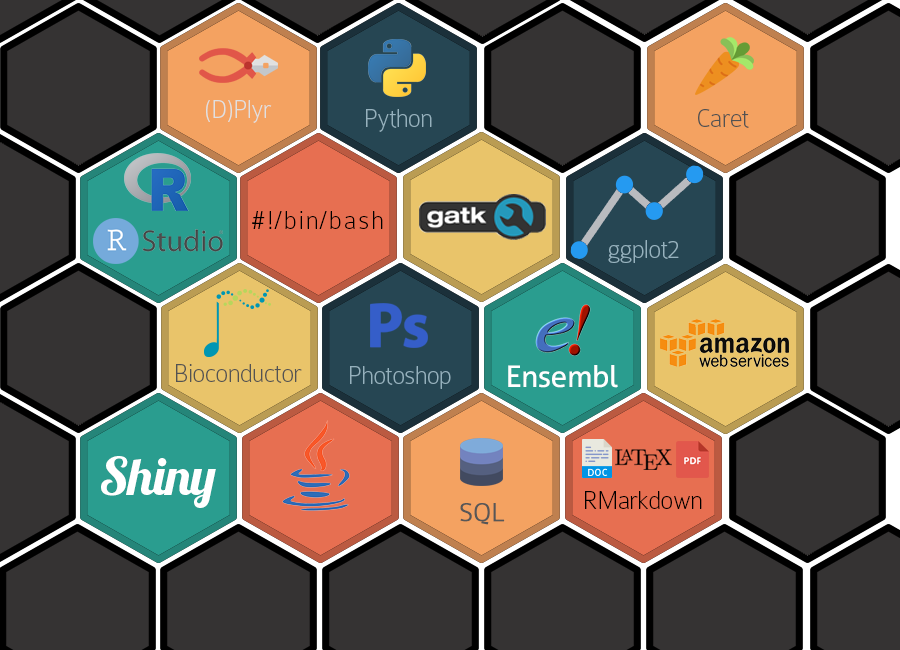
<style>
.page{position:relative;width:900px;height:650px;background:#353333}
.page>*{position:absolute;margin:0}
.t1{font:27px "Colaborate-Thin";letter-spacing:-0.02em;color:#e0e0e0}
.t2{font:27px "Colaborate-Thin";letter-spacing:-0.02em;color:#95b1bd}
.t3{font:27px "Colaborate-Thin";letter-spacing:-0.02em;color:#535353}
.t4{font:27px "Colaborate-Thin";letter-spacing:0.08em;color:#000000}
.t5{font:30px "Aller";letter-spacing:-0.02em;color:#ffffff}
.t6{font:52px "Lobster1.3";letter-spacing:-0.02em;color:#ffffff}
.t7{font:27px "Colaborate-Thin";letter-spacing:-0.02em;color:#000000}
.t8{font:27px "Colaborate-Thin";letter-spacing:-0.02em;color:#575757;font-weight:bold}
</style>
<div class="page">
<p class="t1" style="left:206px;top:100px;width:66px;height:23px">(D)Plyr</p>
<p class="t2" style="left:366px;top:109px;width:66px;height:23px">Python</p>
<p class="t3" style="left:698px;top:109px;width:51px;height:19px">Caret</p>
<p class="t4" style="left:252px;top:211px;width:131px;height:18px">#!/bin/bash</p>
<p class="t2" style="left:608px;top:240px;width:71px;height:23px">ggplot2</p>
<p class="t3" style="left:176px;top:364px;width:126px;height:19px">Bioconductor</p>
<p class="t2" style="left:350px;top:366px;width:101px;height:23px">Photoshop</p>
<p class="t5" style="left:508px;top:365px;width:110px;height:23px">Ensembl</p>
<p class="t6" style="left:101px;top:456px;width:115px;height:52px">Shiny</p>
<p class="t7" style="left:585px;top:491px;width:117px;height:18px">RMarkdown</p>
<p class="t8" style="left:460px;top:503px;width:45px;height:22px">SQL</p>
</div>
